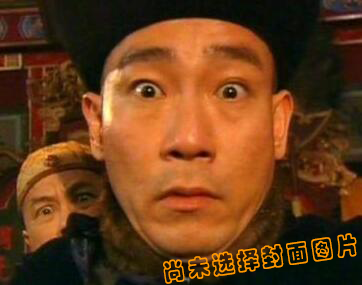
<style>
.page{position:relative;width:362px;height:285px}
.page>*{position:absolute;margin:0}
.t1{font:24px "STCaiyun";letter-spacing:0.1em;color:#ff9800;font-weight:bold;scale:0.92 1}
</style>
<div class="page">
<p class="t1" style="left:163px;top:233px;width:194px;height:51px;rotate:-8deg">尚未选择封面图片</p>
</div>
